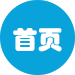
<style>
.page{position:relative;width:75px;height:75px;background:#09a3dc}
.page>*{position:absolute;margin:0}
.t1{font:25px "STHupo";color:#ffffff}
</style>
<div class="page">
<p class="t1" style="left:13px;top:28px;width:49px;height:24px">首页</p>
</div>
